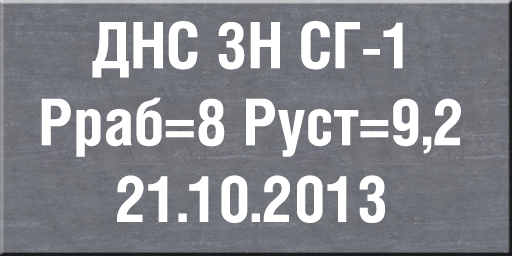
<style>
.page{position:relative;width:512px;height:256px}
.page>*{position:absolute;margin:0}
.t1{font:64px "HeliosCond-Bold";color:#ffffff}
</style>
<div class="page">
<p class="t1" style="left:41px;top:21px;width:420px;height:202px;text-align:center">ДНС 3Н СГ-1<br>Рраб=8 Руст=9,2<br>21.10.2013</p>
</div>
